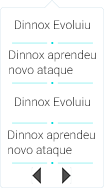
<style>
.page{position:relative;width:104px;height:188px;background:#ffffff}
.page>*{position:absolute;margin:0}
.t1{font:12px "Roboto-Light"}
</style>
<div class="page">
<p class="t1" style="left:15px;top:20px;width:75px;height:9px">Dinnox Evoluiu</p>
<p class="t1" style="left:9px;top:50px;width:87px;height:27px">Dinnox aprendeu<br>novo ataque</p>
<p class="t1" style="left:15px;top:97px;width:75px;height:9px">Dinnox Evoluiu</p>
<p class="t1" style="left:8px;top:130px;width:87px;height:27px">Dinnox aprendeu<br>novo ataque</p>
</div>
